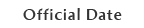
<style>
.page{position:relative;width:144px;height:28px;background:#ffffff}
.page>*{position:absolute;margin:0}
.t1{font:16px "AmiraParadiso";letter-spacing:0.05em;color:#333333}
</style>
<div class="page">
<p class="t1" style="left:23px;top:8px;width:99px;height:12px">Official Date</p>
</div>
